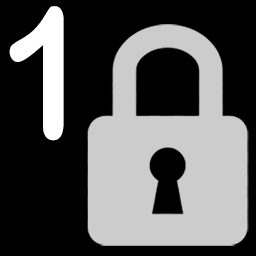
<style>
.page{position:relative;width:256px;height:256px;background:#000000}
.page>*{position:absolute;margin:0}
.t1{font:182.4px "ArialRoundedMTBold";letter-spacing:-0.4em;color:#ffffff;font-variant:small-caps;scale:0.83 1}
</style>
<div class="page">
<p class="t1" style="left:9px;top:6px;width:55px;height:135px">1</p>
</div>
